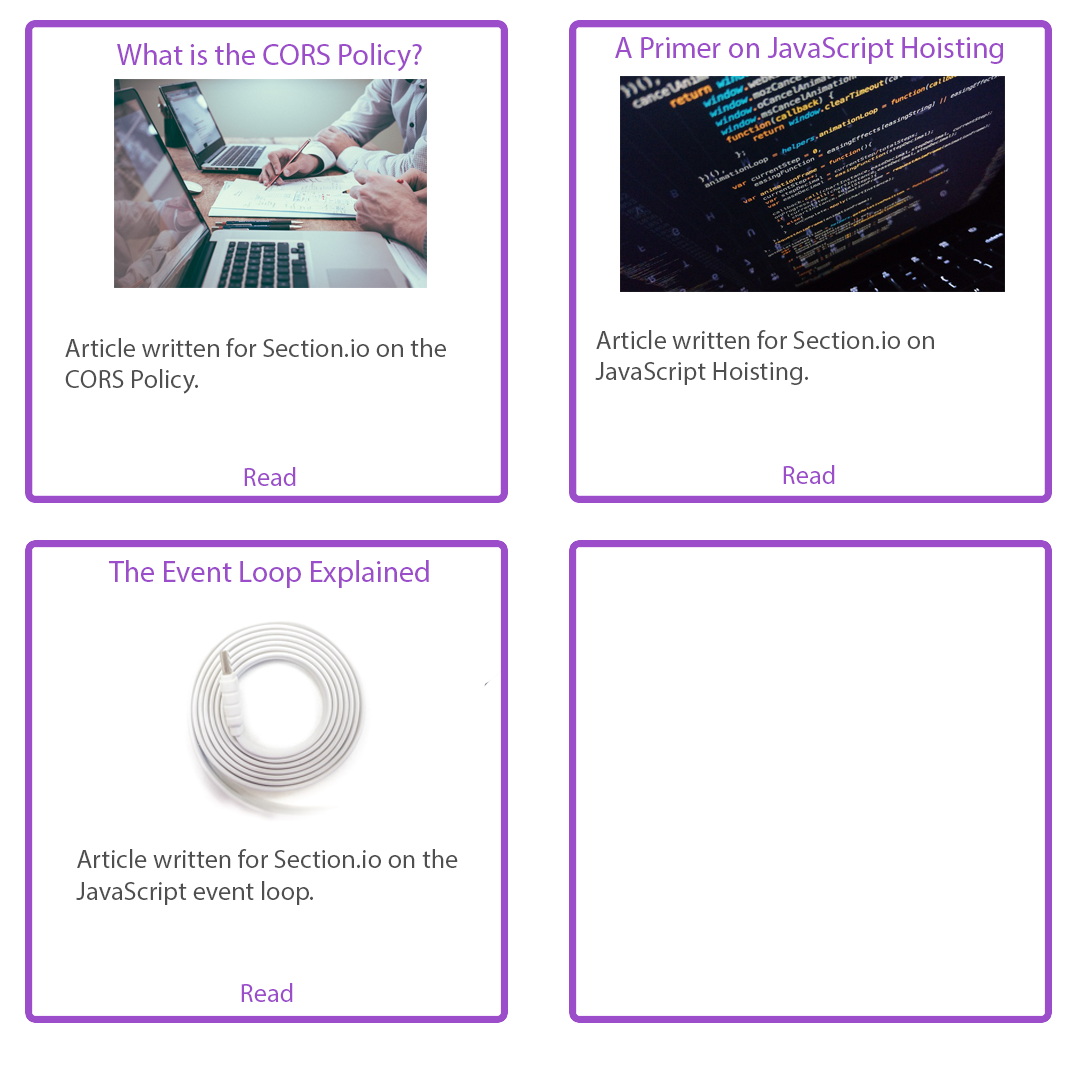
<style>
.page{position:relative;width:1080px;height:1080px;background:#ffffff}
.page>*{position:absolute;margin:0}
.t1{font:30px "MyriadPro-Regular";color:#9b4dca}
.t2{font:26.3px "MyriadPro-Regular";color:#4f4f4f}
.t3{font:26.2px "MyriadPro-Regular";color:#9b4dca}
</style>
<div class="page">
<p class="t1" style="left:615px;top:37px;width:388px;height:27px">A Primer on JavaScript Hoisting</p>
<p class="t1" style="left:117px;top:43px;width:305px;height:29px">What is the CORS Policy?</p>
<p class="t2" style="left:65px;top:338px;width:381px;height:56px">Article written for Section.io on the <br>CORS Policy.</p>
<p class="t2" style="left:595px;top:330px;width:339px;height:55px">Article written for Section.io on <br>JavaScript Hoisting.</p>
<p class="t3" style="left:244px;top:467px;width:52px;height:19px">Read</p>
<p class="t3" style="left:783px;top:465px;width:52px;height:19px">Read</p>
<p class="t1" style="left:109px;top:560px;width:320px;height:28px">The Event Loop Explained</p>
<p class="t2" style="left:76px;top:849px;width:382px;height:56px">Article written for Section.io on the <br>JavaScript event loop.</p>
<p class="t3" style="left:241px;top:983px;width:52px;height:19px">Read</p>
</div>
